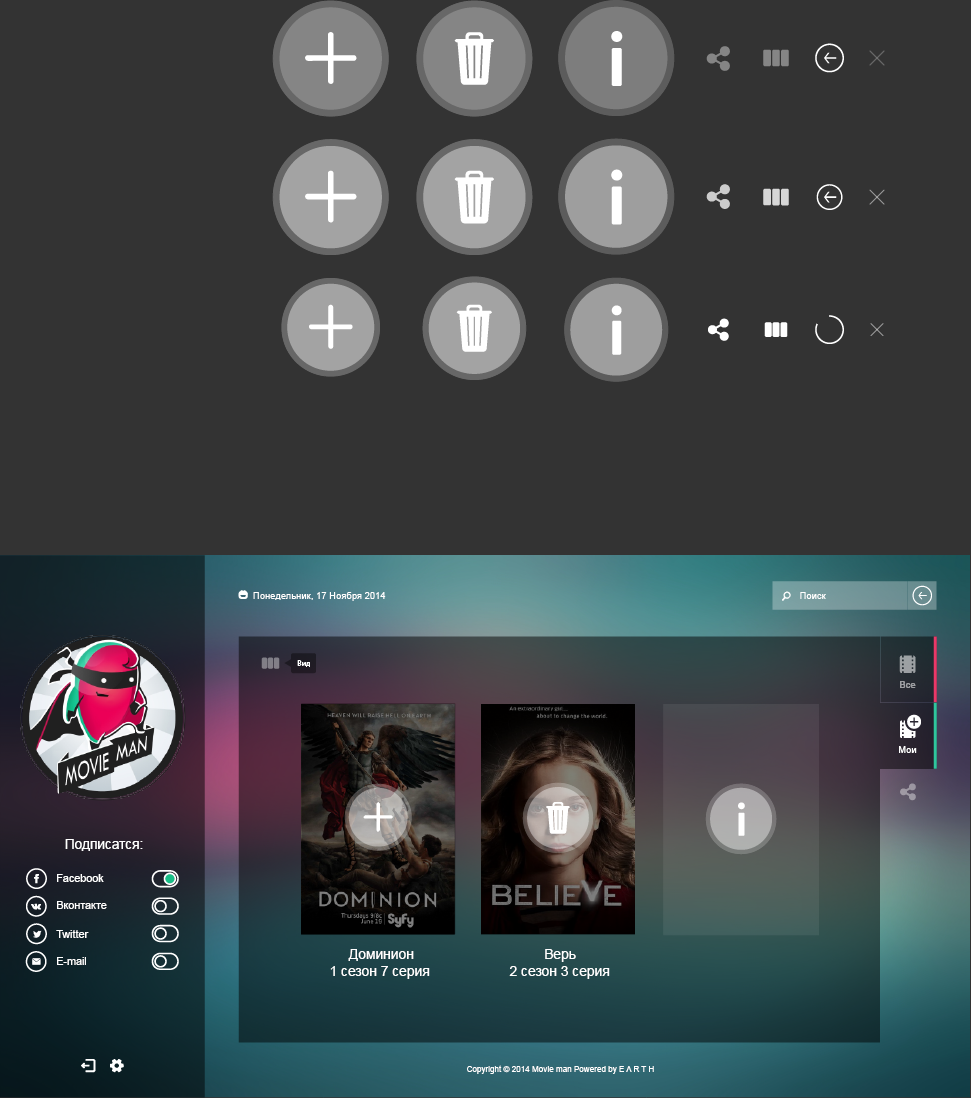
<style>
.page{position:relative;width:971px;height:1098px;background:#333333}
.page>*{position:absolute;margin:0}
.t1{font:9.5px "ArialMT";color:#ffffff}
.t2{font:8.1px "MyriadPro-Regular";color:#ffffff}
.t3{font:9.5px "ArialMT";color:#9e9fa3}
.t4{font:13.5px "ArialMT";color:#ffffff}
.t5{font:10.8px "ArialMT";color:#ffffff}
.t6{font:13.8px "ArialMT";color:#ffffff}
.t7{font:8.1px "ArialMT";color:#ffffff}
</style>
<div class="page">
<p class="t1" style="left:253px;top:592px;width:133px;height:9px">Понедельник, 17 Ноября 2014</p>
<p class="t1" style="left:800px;top:592px;width:26px;height:7px">Поиск</p>
<p class="t2" style="left:297px;top:660px;width:13px;height:7px">Вид</p>
<p class="t3" style="left:900px;top:681px;width:16px;height:7px">Все</p>
<p class="t3" style="left:900px;top:681px;width:16px;height:7px">Все</p>
<p class="t1" style="left:899px;top:746px;width:18px;height:7px">Мои</p>
<p class="t4" style="left:65px;top:839px;width:78px;height:12px">Подписатся:</p>
<p class="t5" style="left:57px;top:874px;width:47px;height:8px">Facebook</p>
<p class="t5" style="left:57px;top:901px;width:50px;height:8px">Вконтакте</p>
<p class="t5" style="left:56px;top:930px;width:33px;height:8px">Twitter</p>
<p class="t6" style="left:330px;top:949px;width:100px;height:30px">Доминион<br>1 сезон 7 серия</p>
<p class="t6" style="left:509px;top:949px;width:101px;height:30px">Верь<br>2 сезон 3 серия</p>
<p class="t5" style="left:57px;top:957px;width:29px;height:8px">E-mail</p>
<p class="t7" style="left:467px;top:1065px;width:187px;height:9px">Copyright © 2014 Movie man Powered by E Λ R T H</p>
</div>
